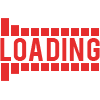
<style>
.page{position:relative;width:100px;height:100px;background:#ffffff}
.page>*{position:absolute;margin:0}
.t1{font:25.6px "Bebas";letter-spacing:0.01em;color:#e62d2d;scale:1.13 1}
</style>
<div class="page">
<p class="t1" style="left:0px;top:38px;width:100px;height:23px">loading</p>
</div>
